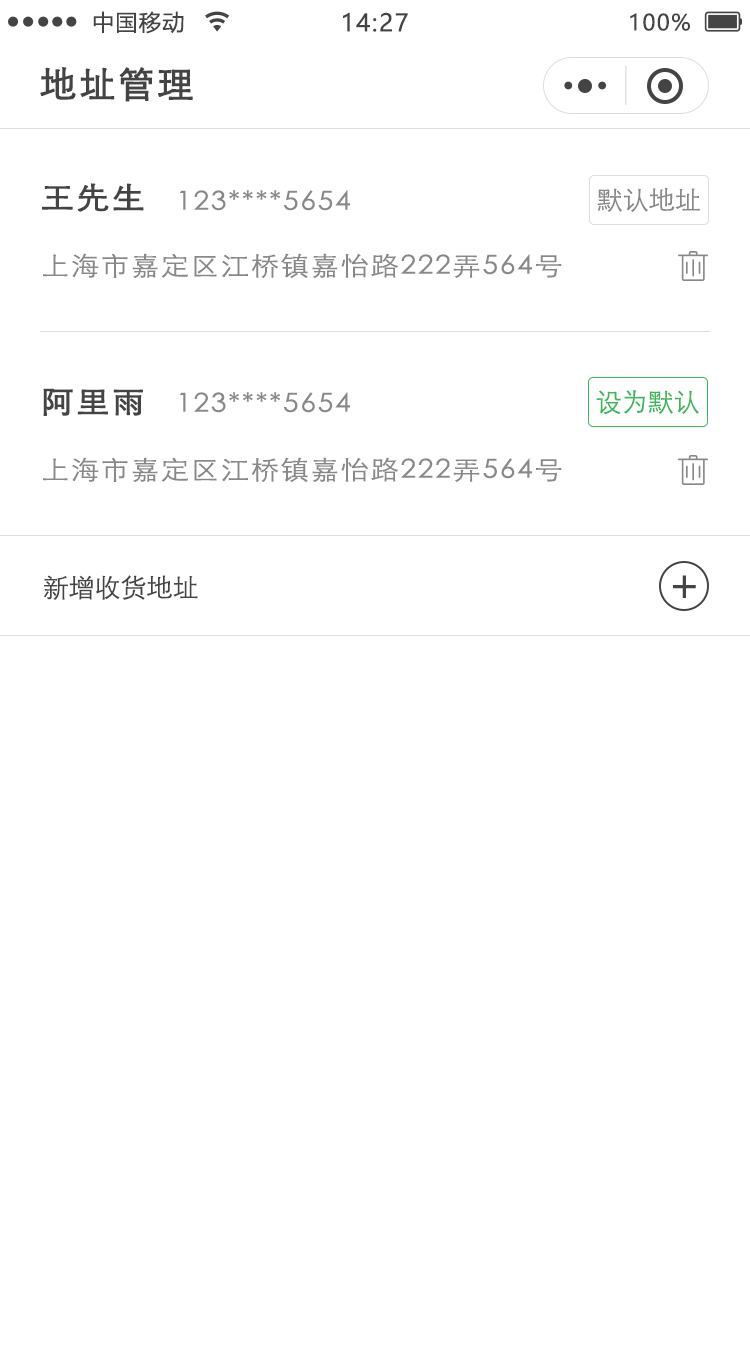
<style>
.page{position:relative;width:750px;height:1347px;background:#ffffff}
.page>*{position:absolute;margin:0}
.t1{font:22px "MicrosoftYaHei";letter-spacing:0.06em;color:#444444}
.t2{font:24px "MicrosoftYaHei";letter-spacing:0.06em;color:#444444}
.t3{font:36px "STXihei";letter-spacing:0.06em;color:#444444;font-weight:bold}
.t4{font:30px "STXihei";letter-spacing:0.06em;color:#444444;font-weight:bold;scale:1.09 1}
.t5{font:26px "STXihei";letter-spacing:0.06em;color:#888888;scale:1.09 1}
.t6{font:26px "STXihei";color:#888888}
.t7{font:26px "STXihei";color:#3db858}
.t8{font:26px "STXihei";color:#444444}
</style>
<div class="page">
<p class="t1" style="left:93px;top:11px;width:91px;height:23px">中国移动</p>
<p class="t2" style="left:343px;top:12px;width:65px;height:20px">14:27</p>
<p class="t1" style="left:630px;top:13px;width:60px;height:18px">100%</p>
<p class="t3" style="left:40px;top:67px;width:153px;height:35px">地址管理</p>
<p class="t4" style="left:42px;top:183px;width:102px;height:29px">王先生</p>
<p class="t5" style="left:180px;top:190px;width:170px;height:21px">123****5654</p>
<p class="t6" style="left:597px;top:187px;width:103px;height:25px">默认地址</p>
<p class="t5" style="left:43px;top:253px;width:519px;height:25px">上海市嘉定区江桥镇嘉怡路222弄564号</p>
<p class="t4" style="left:43px;top:388px;width:100px;height:28px">阿里雨</p>
<p class="t7" style="left:596px;top:390px;width:103px;height:25px">设为默认</p>
<p class="t5" style="left:180px;top:392px;width:170px;height:21px">123****5654</p>
<p class="t5" style="left:43px;top:457px;width:519px;height:25px">上海市嘉定区江桥镇嘉怡路222弄564号</p>
<p class="t8" style="left:44px;top:575px;width:154px;height:25px">新增收货地址</p>
</div>
